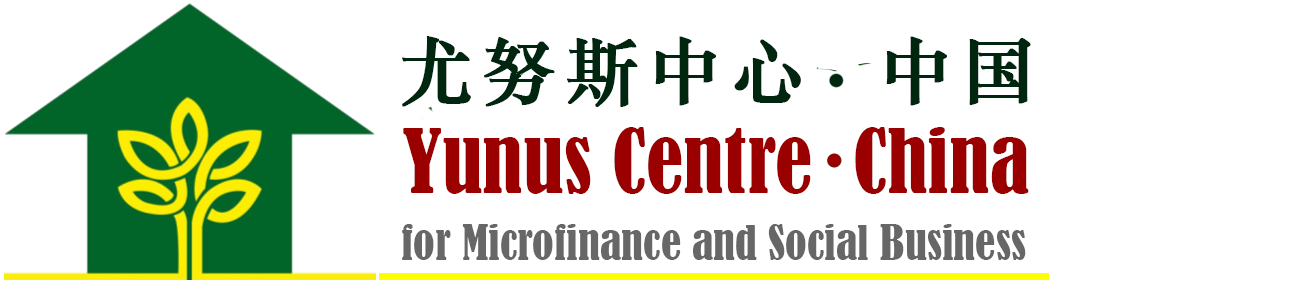
<style>
.page{position:relative;width:1307px;height:282px;background:#ffffff}
.page>*{position:absolute;margin:0}
.t1{font:73.3px "STZhongsong";letter-spacing:0.1em;color:#00260f;font-weight:bold}
.t2{font:83.3px "BernardMT-Condensed";color:#9b0000}
.t3{font:45px "BernardMT-Condensed";color:#676767}
</style>
<div class="page">
<p class="t1" style="left:402px;top:36px;width:629px;height:71px">尤努斯中心  中国</p>
<p class="t2" style="left:403px;top:127px;width:626px;height:67px">Yunus Centre  China</p>
<p class="t3" style="left:402px;top:224px;width:624px;height:36px">for Microfinance and Social Business</p>
</div>
